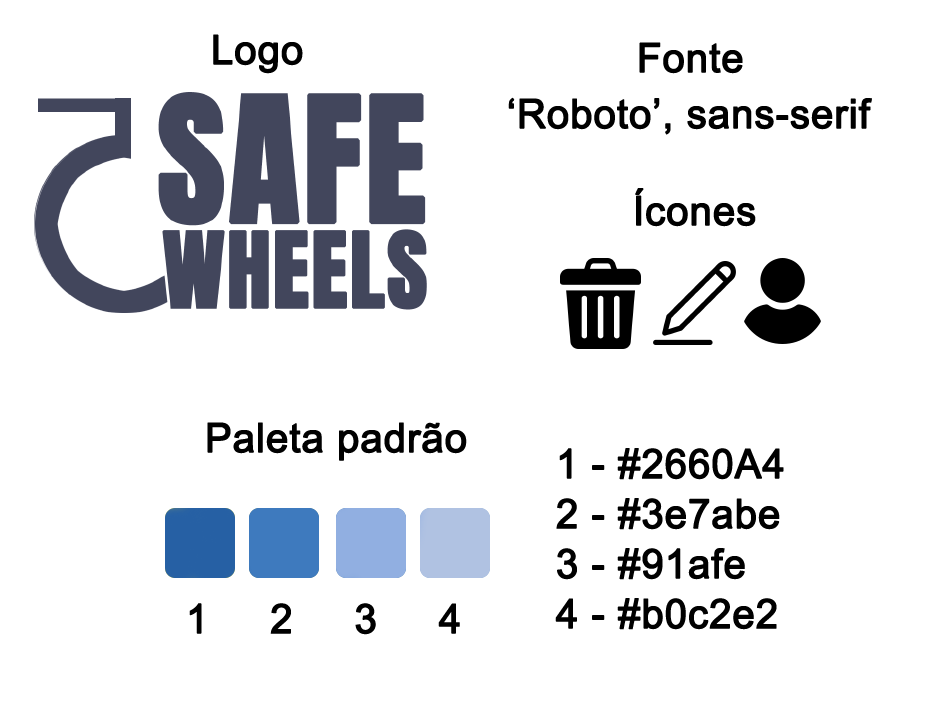
<style>
.page{position:relative;width:948px;height:720px;background:#ffffff}
.page>*{position:absolute;margin:0}
.t1{font:40.4px "ArialMT";color:#000000;font-weight:bold}
.t2{font:40.4px/50px "ArialMT";color:#000000;font-weight:bold}
</style>
<div class="page">
<p class="t1" style="left:213px;top:34px;width:90px;height:40px">Logo</p>
<p class="t1" style="left:639px;top:42px;width:104px;height:32px">Fonte</p>
<p class="t1" style="left:508px;top:97px;width:364px;height:38px">‘Roboto’, sans-serif</p>
<p class="t1" style="left:635px;top:188px;width:121px;height:39px">Ícones</p>
<p class="t1" style="left:207px;top:422px;width:260px;height:39px">Paleta padrão</p>
<p class="t2" style="left:555px;top:448px;width:229px;height:182px">1 - #2660A4<br>2 - #3e7abe<br>3 - #91afe<br>4 - #b0c2e2</p>
<p class="t1" style="left:189px;top:603px;width:271px;height:32px">1     2     3     4</p>
</div>
